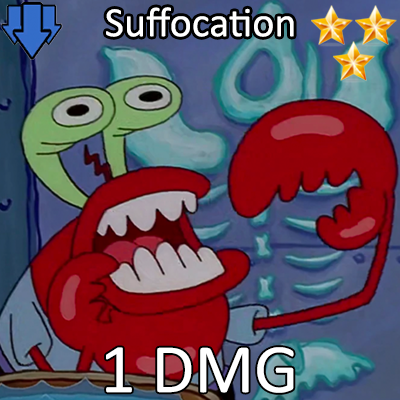
<style>
.page{position:relative;width:400px;height:400px}
.page>*{position:absolute;margin:0}
.t1{font:72px "Calibri";color:#ffffff}
.t2{font:120px "Calibri";color:#ffffff}
</style>
<div class="page">
<p class="t1" style="left:106px;top:7px;width:188px;height:30px">Suffocation</p>
<p class="t2" style="left:106px;top:347px;width:188px;height:46px">1 DMG</p>
</div>
